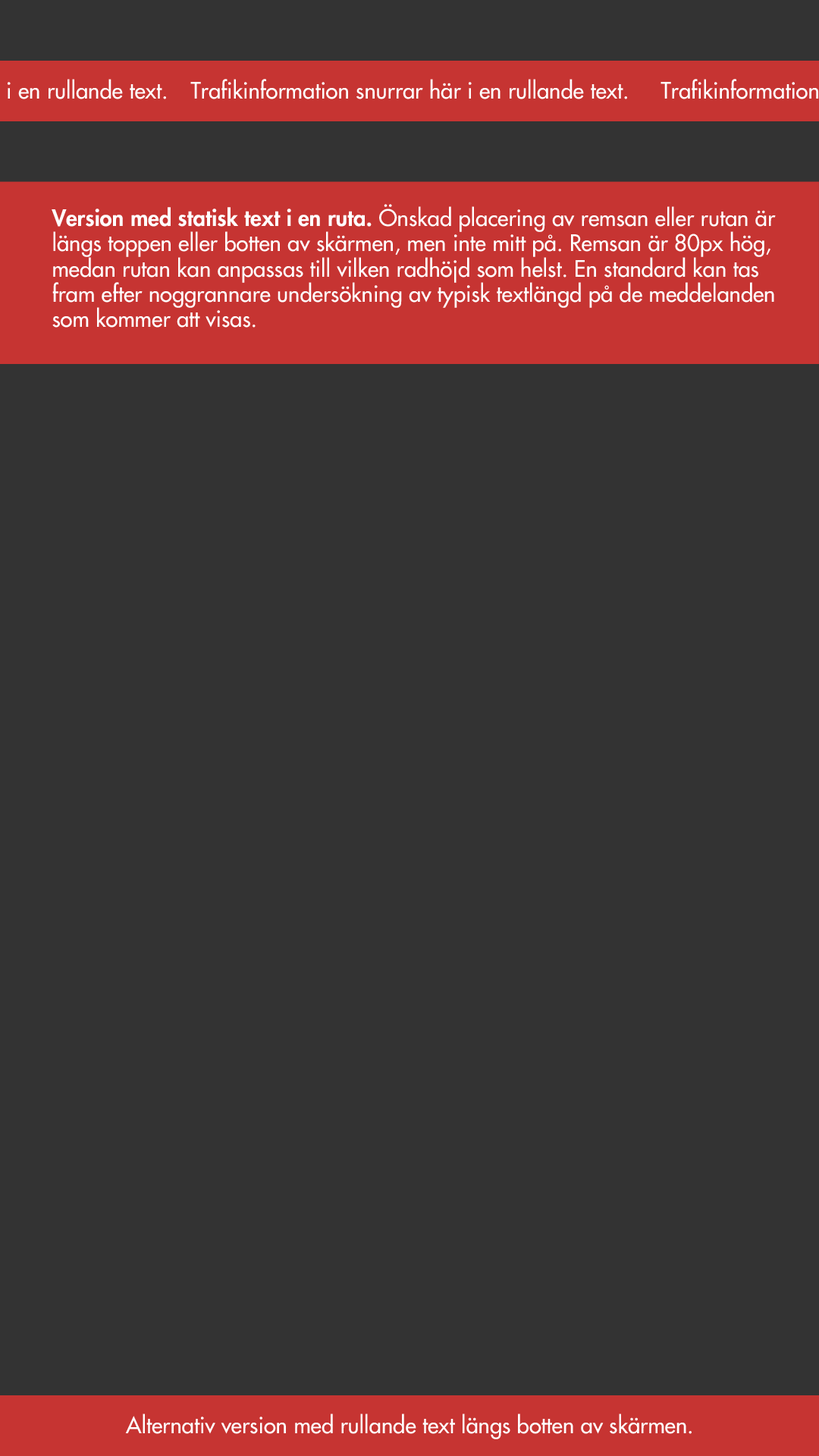
<style>
.page{position:relative;width:819px;height:1456px;background:#333333}
.page>*{position:absolute;margin:0}
.t1{font:22.1px "FuturaLT";color:#ffffff}
.t2{font:22.1px/25.3px "FuturaLT";color:#ffffff}
.t3{font:22.1px/25.3px "FuturaLT-Heavy";color:#ffffff}
</style>
<div class="page">
<p class="t1" style="left:190px;top:79px;width:437px;height:20px">Trafikinformation snurrar här i en rullande text.</p>
<p class="t2" style="left:52px;top:204px;width:724px;height:124px"><span class="t3">Version med statisk text i en ruta. </span>Önskad placering av remsan eller rutan är längs toppen eller botten av skärmen, men inte mitt på. Remsan är 80px hög, medan rutan kan anpassas till vilken radhöjd som helst. En standard kan tas fram efter noggrannare undersökning av typisk textlängd på de meddelanden som kommer att visas.</p>
<p class="t1" style="left:125px;top:1414px;width:567px;height:25px">Alternativ version med rullande text längs botten av skärmen.</p>
</div>
